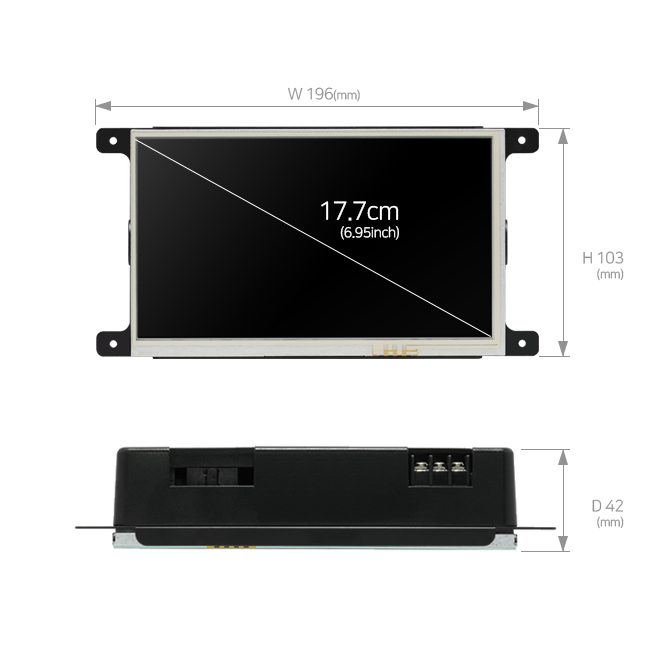
<style>
.page{position:relative;width:650px;height:650px;background:#ffffff}
.page>*{position:absolute;margin:0}
.t1{font:16px "NanumSquareR";letter-spacing:-0.03em;color:#939393}
.t2{font:12px "NanumSquareR";letter-spacing:-0.03em;color:#939393}
.t3{font:14px/18px "NanumSquareR";letter-spacing:-0.03em;color:#ffffff}
.t4{font:25px/18px "NanumSquareR";letter-spacing:-0.03em;color:#ffffff}
.t5{font:16px/15px "NanumSquareR";letter-spacing:-0.03em;color:#939393}
.t6{font:12px/15px "NanumSquareR";letter-spacing:-0.03em;color:#939393}
</style>
<div class="page">
<p class="t1" style="left:287px;top:87px;width:73px;height:15px">W 196<span class="t2">(mm)</span></p>
<p class="t3" style="left:321px;top:201px;width:78px;height:39px;text-align:right"><span class="t4">17.7cm<br></span>(6.95inch)</p>
<p class="t5" style="left:583px;top:251px;width:41px;height:30px;text-align:right">H 103<br><span class="t6">(mm)</span></p>
<p class="t5" style="left:592px;top:499px;width:32px;height:30px;text-align:right">D 42<br><span class="t6">(mm)</span></p>
</div>
